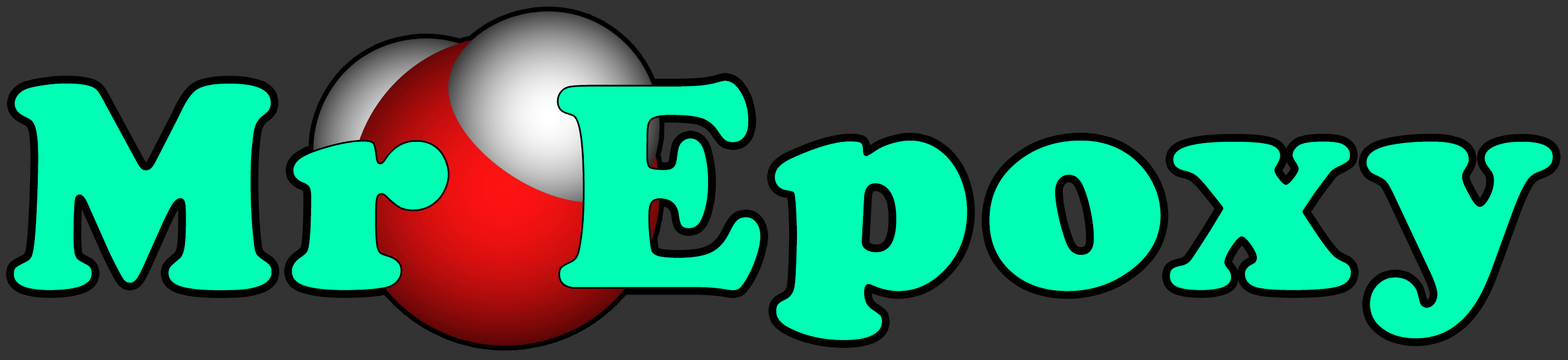
<style>
.page{position:relative;width:1568px;height:360px;background:#333333}
.page>*{position:absolute;margin:0}
.t1{font:300.3px "CooperBlack";letter-spacing:0.05em;color:#00ffb4}
</style>
<div class="page">
<p class="t1" style="left:14px;top:80px;width:1539px;height:260px">Mr Epoxy</p>
<p class="t1" style="left:14px;top:80px;width:1539px;height:260px">Mr Epoxy</p>
</div>
